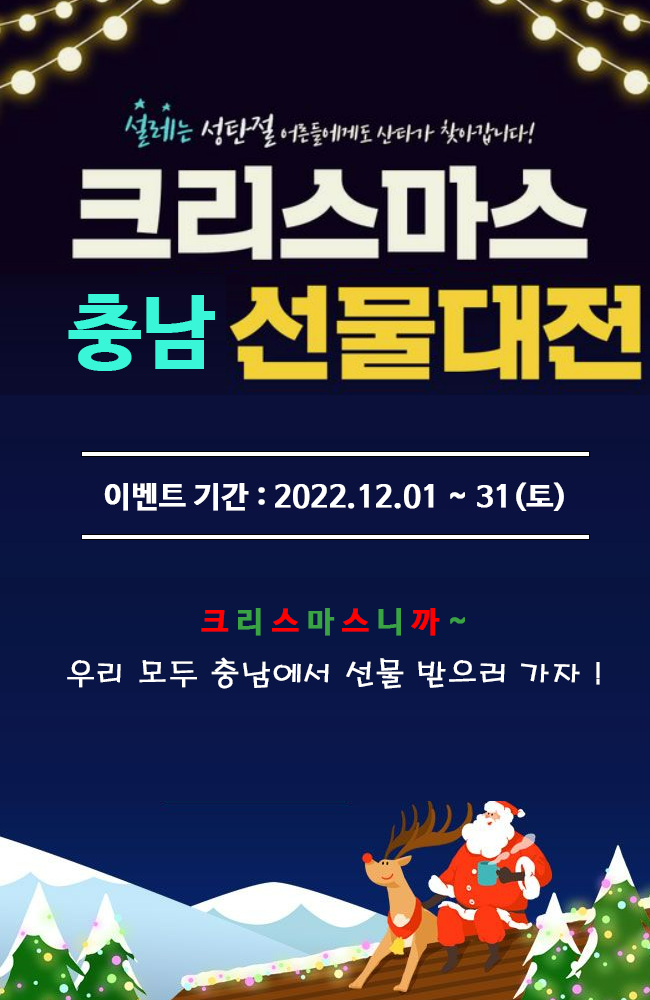
<style>
.page{position:relative;width:650px;height:1000px}
.page>*{position:absolute;margin:0}
.t1{font:80px "NanumBarunGothicBold";color:#39f6d9;font-weight:bold}
.t2{font:30px "NanumBarunGothicBold";color:#ffffff;font-weight:bold}
.t3{font:30px "H2porL";color:#ffffff;font-weight:bold}
.t4{font:30px "NanumBarunGothicBold";color:#ff0000;font-weight:bold}
.t5{font:30px "NanumBarunGothicBold";color:#3aa343;font-weight:bold}
</style>
<div class="page">
<p class="t1" style="left:68px;top:294px;width:147px;height:77px">충남</p>
<p class="t2" style="left:104px;top:482px;width:460px;height:29px">이벤트 기간 : 2022.12.01 ~ 31(토)</p>
<p class="t3" style="left:67px;top:608px;width:533px;height:81px;text-align:center"><span class="t4">크 </span><span class="t5">리 </span><span class="t4">스 </span><span class="t5">마 </span><span class="t4">스 </span><span class="t5">니 </span><span class="t4">까 </span><span class="t5">~<br></span>우리 모두 충남에서 선물 받으러 가자 !</p>
</div>
